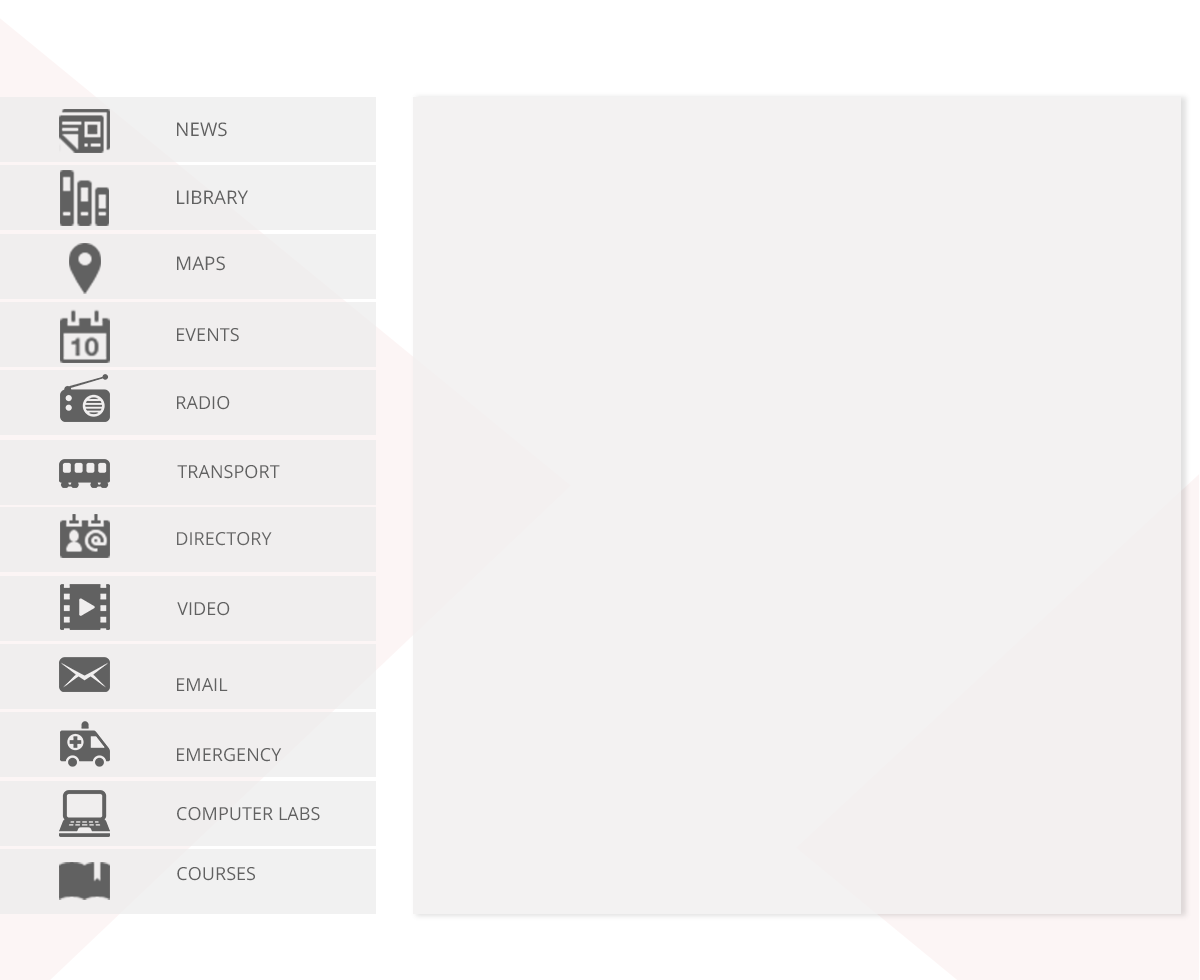
<style>
.page{position:relative;width:1200px;height:980px;background:#f3f2f2}
.page>*{position:absolute;margin:0}
.t1{font:18.7px "OpenSans";color:#616161;text-transform:uppercase}
.t2{font:18px "OpenSans";color:#616161;text-transform:uppercase}
.t3{font:18px "OpenSans";color:#666666;text-transform:uppercase}
</style>
<div class="page">
<p class="t1" style="left:177px;top:122px;width:50px;height:15px">News</p>
<p class="t1" style="left:177px;top:190px;width:71px;height:14px">Library</p>
<p class="t1" style="left:177px;top:256px;width:48px;height:15px">Maps</p>
<p class="t2" style="left:177px;top:328px;width:62px;height:14px">Events</p>
<p class="t2" style="left:177px;top:396px;width:53px;height:14px">Radio</p>
<p class="t2" style="left:177px;top:465px;width:103px;height:14px">Transport</p>
<p class="t3" style="left:177px;top:532px;width:95px;height:14px">Directory</p>
<p class="t2" style="left:177px;top:602px;width:53px;height:14px">Video</p>
<p class="t2" style="left:177px;top:678px;width:51px;height:13px">Email</p>
<p class="t2" style="left:177px;top:748px;width:105px;height:14px">Emergency</p>
<p class="t2" style="left:177px;top:807px;width:143px;height:14px">Computer Labs</p>
<p class="t2" style="left:177px;top:867px;width:78px;height:14px">Courses</p>
</div>
